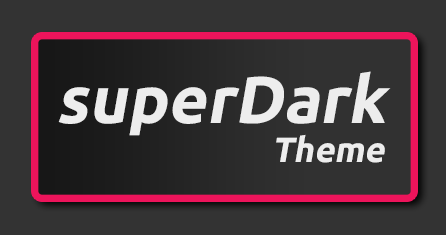
<style>
.page{position:relative;width:446px;height:235px;background:#333333}
.page>*{position:absolute;margin:0}
.t1{font:66.2px "Ubuntu-Bold";color:#ededed;font-style:italic}
.t2{font:35px "Ubuntu-Bold";color:#ededed;font-style:italic}
</style>
<div class="page">
<p class="t1" style="left:58px;top:71px;width:333px;height:65px">superDark</p>
<p class="t2" style="left:276px;top:134px;width:109px;height:29px">Theme</p>
</div>
